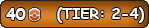
<style>
.page{position:relative;width:149px;height:28px}
.page>*{position:absolute;margin:0}
.t1{font:12px "ComicSansMS-Bold";color:#ffffff}
.t2{font:14.7px "ComicSansMS-Bold";color:#ffffff}
</style>
<div class="page">
<p class="t1" style="left:6px;top:8px;width:20px;height:12px">40</p>
<p class="t2" style="left:57px;top:7px;width:87px;height:16px">(TIER: 2-4)</p>
</div>
